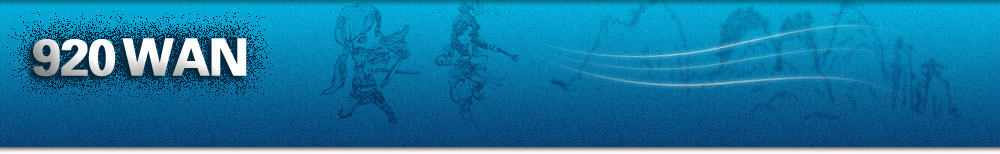
<style>
.page{position:relative;width:1000px;height:154px}
.page>*{position:absolute;margin:0}
.t1{font:51px "FZZYJW--GB1-0";letter-spacing:-0.04em;color:#ffffff;font-weight:bold}
.t2{font:51px "FZZYJW--GB1-0";letter-spacing:0.1em;color:#ffffff;font-weight:bold}
</style>
<div class="page">
<p class="t1" style="left:33px;top:38px;width:214px;height:39px">92<span class="t2">0</span>WAN</p>
</div>
